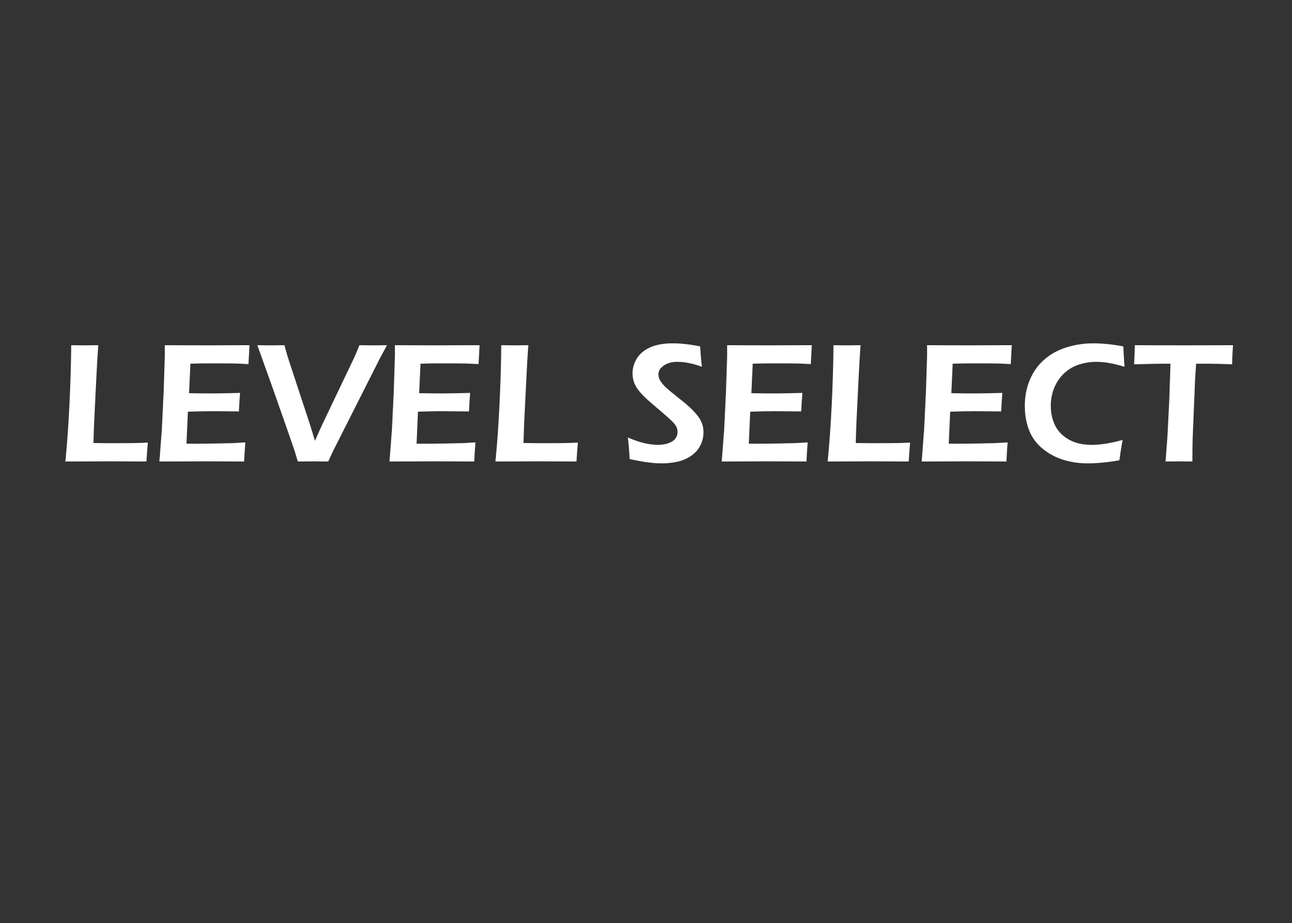
<style>
.page{position:relative;width:1292px;height:923px;background:#333333}
.page>*{position:absolute;margin:0}
.t1{font:174.1px "ErasITC-Demi";color:#ffffff}
</style>
<div class="page">
<p class="t1" style="left:65px;top:343px;width:1169px;height:120px">LEVEL SELECT</p>
</div>
